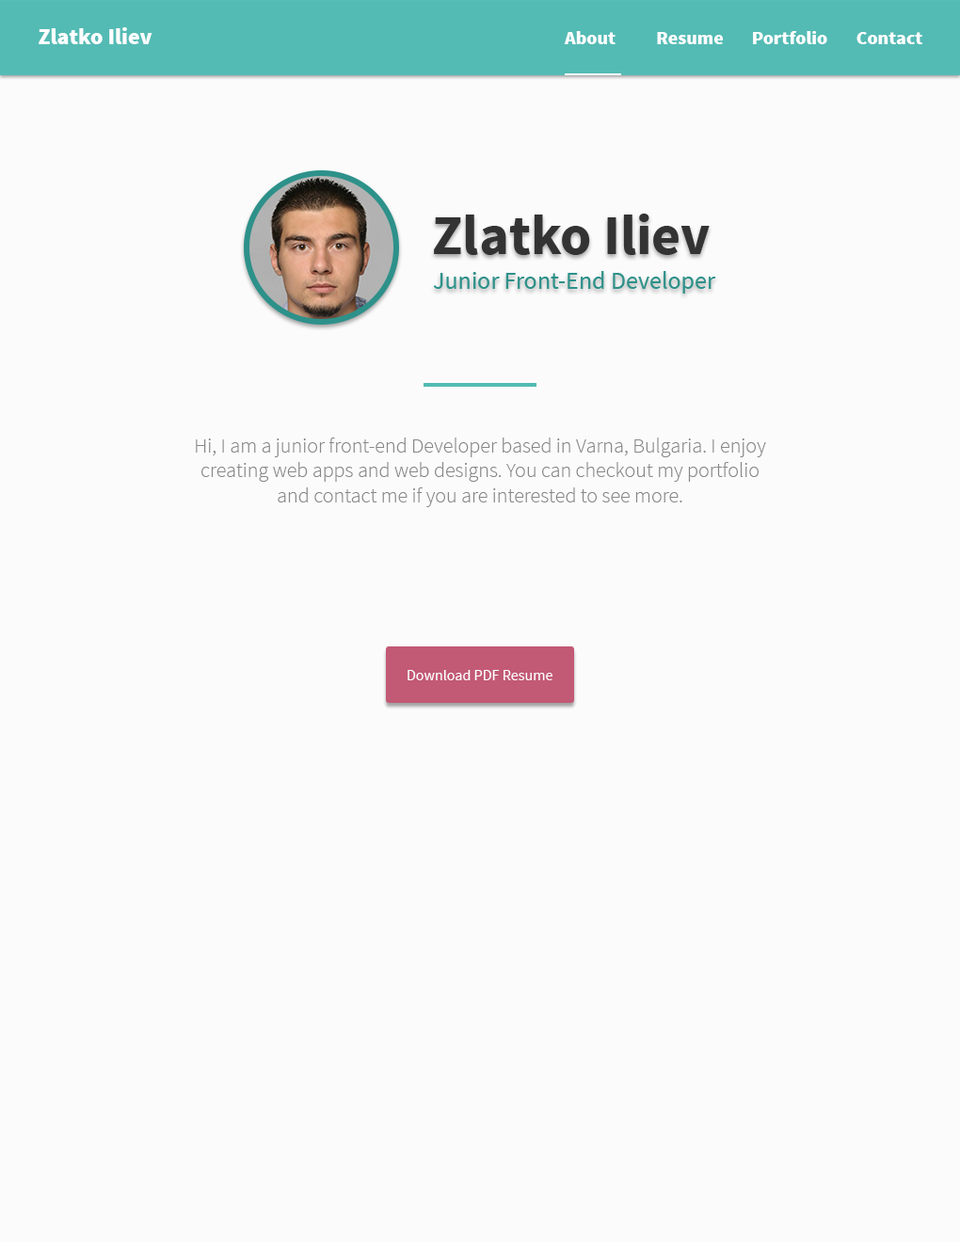
<style>
.page{position:relative;width:960px;height:1242px;background:#fbfbfb}
.page>*{position:absolute;margin:0}
.t1{font:22.6px "SourceSansPro-Black";color:#ffffff}
.t2{font:18.8px "SourceSansPro-Black";color:#ffffff}
.t3{font:56.5px "SourceSansPro-Bold";color:#333333}
.t4{font:24.5px "SourceSansPro-Regular";color:#2d918a}
.t5{font:20.7px "SourceSansPro-Light";color:#878787}
.t6{font:15.1px "SourceSansPro-Regular";color:#ffffff}
</style>
<div class="page">
<p class="t1" style="left:39px;top:27px;width:113px;height:17px">Zlatko Iliev</p>
<p class="t2" style="left:564px;top:31px;width:51px;height:13px">About</p>
<p class="t2" style="left:657px;top:32px;width:66px;height:12px">Resume</p>
<p class="t2" style="left:753px;top:31px;width:74px;height:13px">Portfolio</p>
<p class="t2" style="left:856px;top:32px;width:66px;height:12px">Contact</p>
<p class="t3" style="left:434px;top:214px;width:276px;height:41px">Zlatko Iliev</p>
<p class="t4" style="left:433px;top:271px;width:283px;height:23px">Junior Front-End Developer</p>
<p class="t5" style="left:196px;top:438px;width:570px;height:69px;text-align:center">Hi, I am a junior front-end Developer based in Varna, Bulgaria. I enjoy creating web apps and web designs. You can checkout my portfolio and contact me if you are interested to see more.</p>
<p class="t6" style="left:407px;top:670px;width:145px;height:10px">Download PDF Resume</p>
</div>
